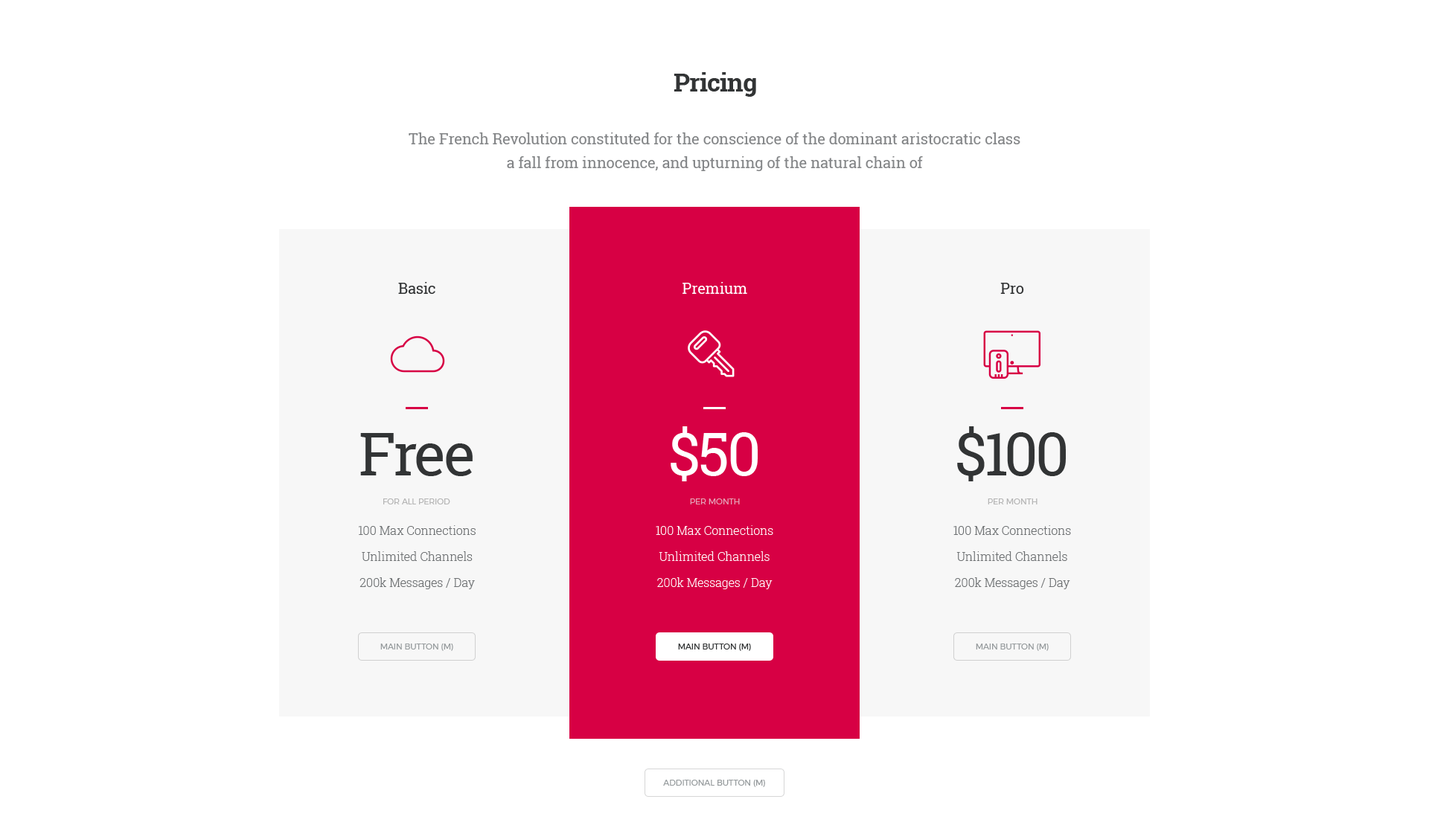
<style>
.page{position:relative;width:1429px;height:834px;background:#ffffff}
.page>*{position:absolute;margin:0}
.t1{font:25.3px "RobotoSlab-Bold";letter-spacing:-0.02em;color:#323435}
.t2{font:14.9px/23.8px "RobotoSlab-Regular";color:#838587}
.t3{font:14.9px "RobotoSlab-Regular";color:#323435}
.t4{font:14.9px "RobotoSlab-Regular";color:#ffffff}
.t5{font:59.5px "RobotoSlab-Regular";letter-spacing:-0.02em;color:#323435}
.t6{font:59.5px "RobotoSlab-Regular";letter-spacing:-0.02em;color:#ffffff}
.t7{font:8.2px "Montserrat-Regular";color:#b5b5b5;text-transform:uppercase}
.t8{font:8.2px "Montserrat-Regular";color:#e5a6ba;text-transform:uppercase}
.t9{font:11.9px/26.1px "RobotoSlab-Light";color:#6e7173}
.t10{font:11.9px/26.1px "RobotoSlab-Light";color:#ffffff}
.t11{font:8.2px "Montserrat-Regular";color:#969b9d;text-transform:uppercase}
.t12{font:8.2px "Montserrat-Regular";color:#323435;text-transform:uppercase}
</style>
<div class="page">
<p class="t1" style="left:674px;top:72px;width:82px;height:25px">Pricing</p>
<p class="t2" style="left:409px;top:132px;width:611px;height:39px;text-align:center">The French Revolution constituted for the conscience of the dominant aristocratic class <br>a fall from innocence, and upturning of the natural chain of</p>
<p class="t3" style="left:398px;top:282px;width:37px;height:12px">Basic</p>
<p class="t4" style="left:683px;top:282px;width:64px;height:12px">Premium</p>
<p class="t3" style="left:1000px;top:283px;width:24px;height:11px">Pro</p>
<p class="t5" style="left:360px;top:433px;width:113px;height:43px">Free</p>
<p class="t6" style="left:671px;top:426px;width:87px;height:56px">$50</p>
<p class="t5" style="left:957px;top:426px;width:109px;height:56px">$100</p>
<p class="t7" style="left:383px;top:499px;width:67px;height:6px">For all period</p>
<p class="t8" style="left:690px;top:499px;width:50px;height:6px">per month</p>
<p class="t7" style="left:988px;top:499px;width:50px;height:6px">per month</p>
<p class="t9" style="left:359px;top:525px;width:117px;height:65px;text-align:center">100 Max Connections<br>Unlimited Channels<br>200k Messages / Day</p>
<p class="t10" style="left:656px;top:525px;width:117px;height:65px;text-align:center">100 Max Connections<br>Unlimited Channels<br>200k Messages / Day</p>
<p class="t9" style="left:953px;top:525px;width:118px;height:65px;text-align:center">100 Max Connections<br>Unlimited Channels<br>200k Messages / Day</p>
<p class="t11" style="left:380px;top:644px;width:73px;height:7px">Main button (M)</p>
<p class="t12" style="left:678px;top:644px;width:73px;height:7px">Main button (M)</p>
<p class="t11" style="left:976px;top:644px;width:73px;height:7px">Main button (M)</p>
<p class="t11" style="left:663px;top:780px;width:102px;height:7px">Additional button (M)</p>
</div>
